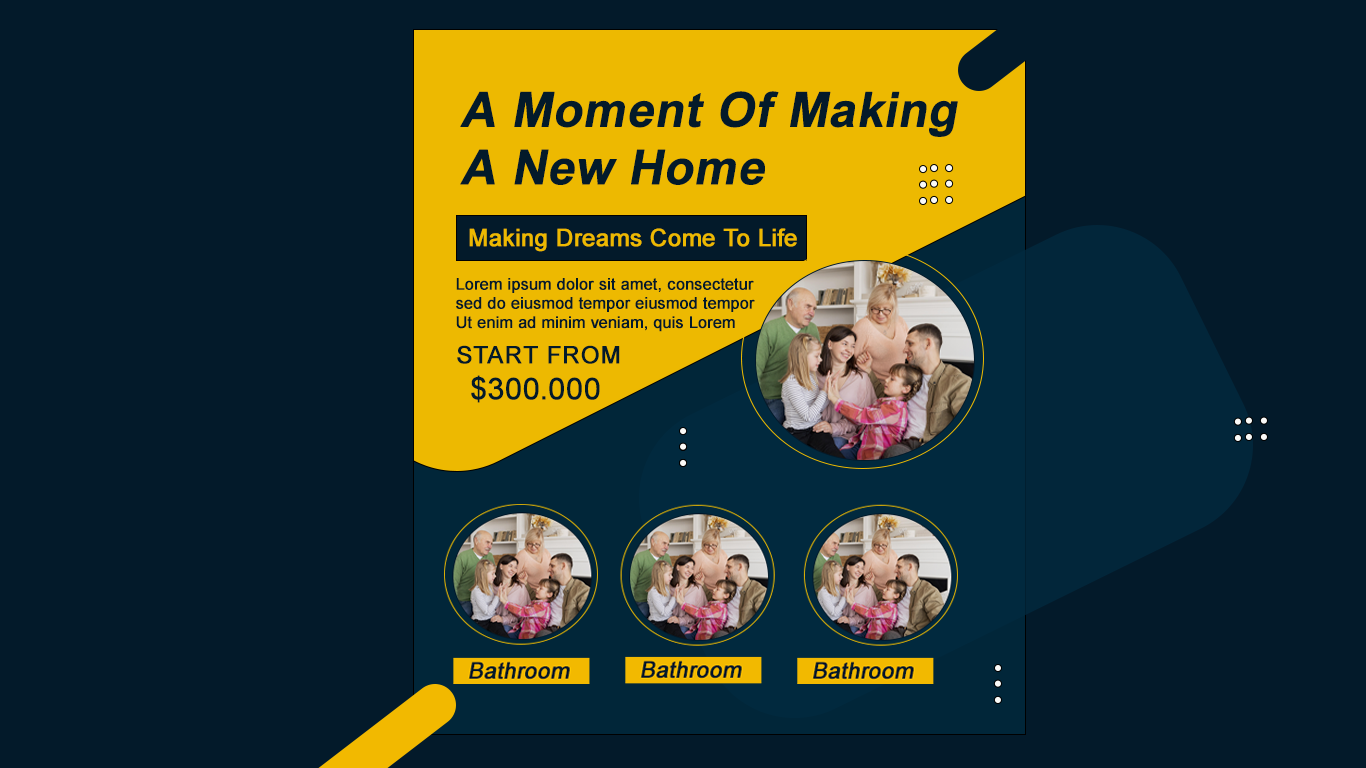
<style>
.page{position:relative;width:1366px;height:768px;background:#031a2a}
.page>*{position:absolute;margin:0}
.t1{font:48px "Arial-BoldMT";color:#031a2a;font-weight:bold;font-style:italic}
.t2{font:24px "ArialMT";color:#edb901;font-weight:bold}
.t3{font:16px "ArialMT";color:#031a2a;font-weight:bold}
.t4{font:24px "ArialMT";color:#031a2a;text-transform:uppercase;font-weight:bold}
.t5{font:30px "ArialMT";color:#031a2a;text-transform:uppercase;font-weight:bold}
</style>
<div class="page">
<p class="t1" style="left:460px;top:91px;width:498px;height:94px">A Moment Of Making <br>A New Home</p>
<p class="t2" style="left:469px;top:228px;width:328px;height:24px">Making Dreams Come To Life</p>
<p class="t3" style="left:456px;top:278px;width:299px;height:54px">Lorem ipsum dolor sit amet, consectetur <br>sed do eiusmod tempor eiusmod tempor<br>Ut enim ad minim veniam, quis Lorem</p>
<p class="t4" style="left:457px;top:345px;width:163px;height:58px">Start From<br>  <span class="t5">$300.000</span></p>
</div>
